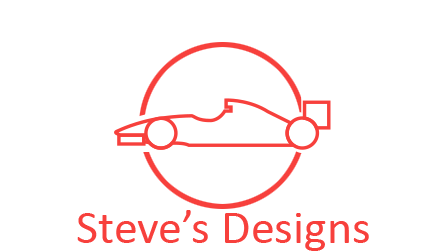
<style>
.page{position:relative;width:445px;height:251px;background:#ffffff}
.page>*{position:absolute;margin:0}
.t1{font:48px "Calibri";color:#f7403c}
</style>
<div class="page">
<p class="t1" style="left:77px;top:210px;width:292px;height:41px">Steve’s Designs</p>
</div>
